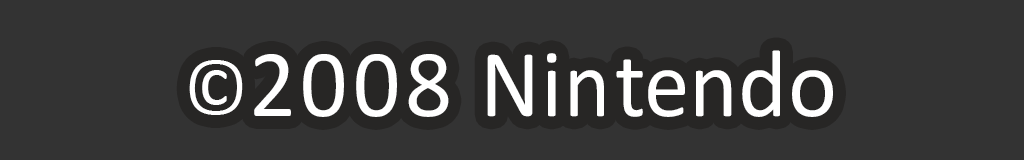
<style>
.page{position:relative;width:1024px;height:160px;background:#333333}
.page>*{position:absolute;margin:0}
.t1{font:96.7px "Calibri";letter-spacing:0.04em;color:#ffffff;scale:0.96 1}
.t2{font:79px "Calibri";letter-spacing:0.08em;color:#ffffff}
.t3{font:96.7px "Calibri";letter-spacing:0.08em;color:#ffffff;scale:0.96 1}
.t4{font:96.7px "Calibri";letter-spacing:0.06em;color:#ffffff;scale:0.96 1}
.t5{font:96.7px "Calibri";letter-spacing:0.08em;color:#ffffff;scale:0.91 1}
.t6{font:96.7px "Calibri";letter-spacing:0.02em;color:#ffffff;scale:0.94 1}
.t7{font:96.7px "Calibri";letter-spacing:0.02em;color:#ffffff;scale:0.96 1}
</style>
<div class="page">
<p class="t1" style="left:189px;top:50px;width:644px;height:67px"><span class="t2">©</span><span class="t3">2</span><span class="t4">00</span>8 Ni<span class="t5">n</span><span class="t6">te</span><span class="t7">n</span>d<span class="t7">o</span></p>
</div>
